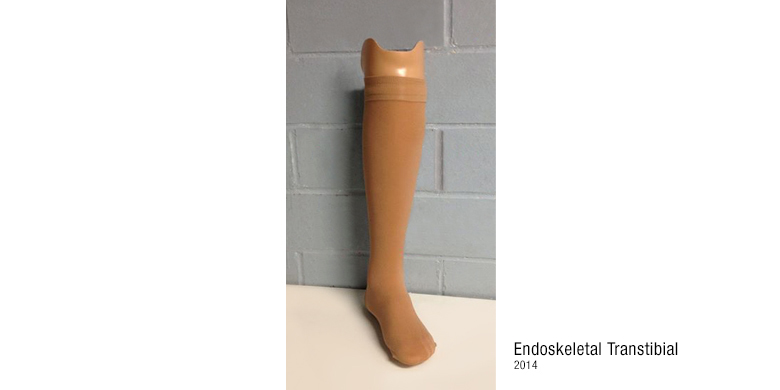
<style>
.page{position:relative;width:780px;height:390px;background:#ffffff}
.page>*{position:absolute;margin:0}
.t1{font:18px/14px "HelveticaNeueLTPro-Cn";letter-spacing:0.02em;color:#000000}
.t2{font:12px/14px "HelveticaNeueLTPro-Cn";letter-spacing:0.02em;color:#000000}
</style>
<div class="page">
<p class="t1" style="left:514px;top:342px;width:164px;height:28px">Endoskeletal Transtibial<br><span class="t2">2014</span></p>
</div>
